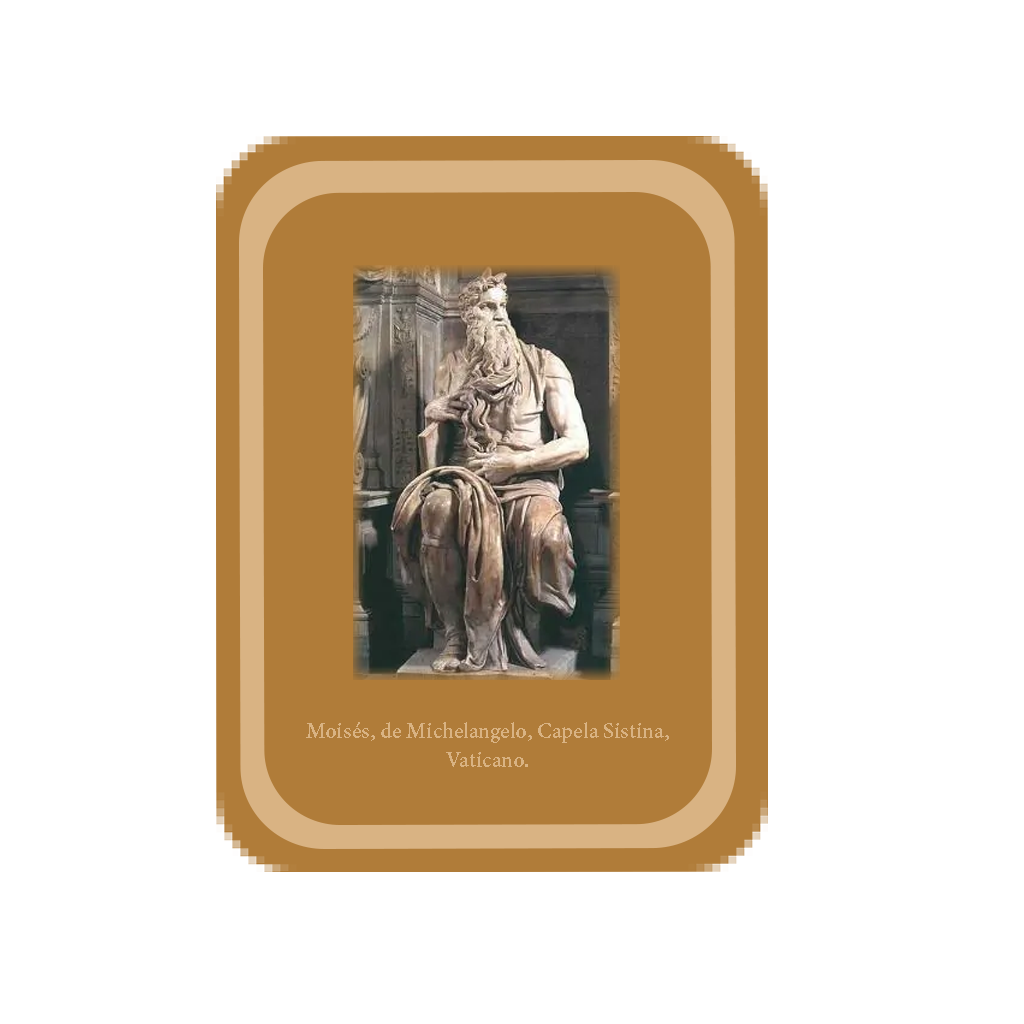
<style>
.page{position:relative;width:1024px;height:1024px;background:#ffffff}
.page>*{position:absolute;margin:0}
.t1{font:24.2px "AdobeDevanagari-Bold";color:#d9b383}
</style>
<div class="page">
<p class="t1" style="left:306px;top:722px;width:363px;height:45px;text-align:center">Moisés, de Michelangelo, Capela Sistina, Vaticano.</p>
</div>
